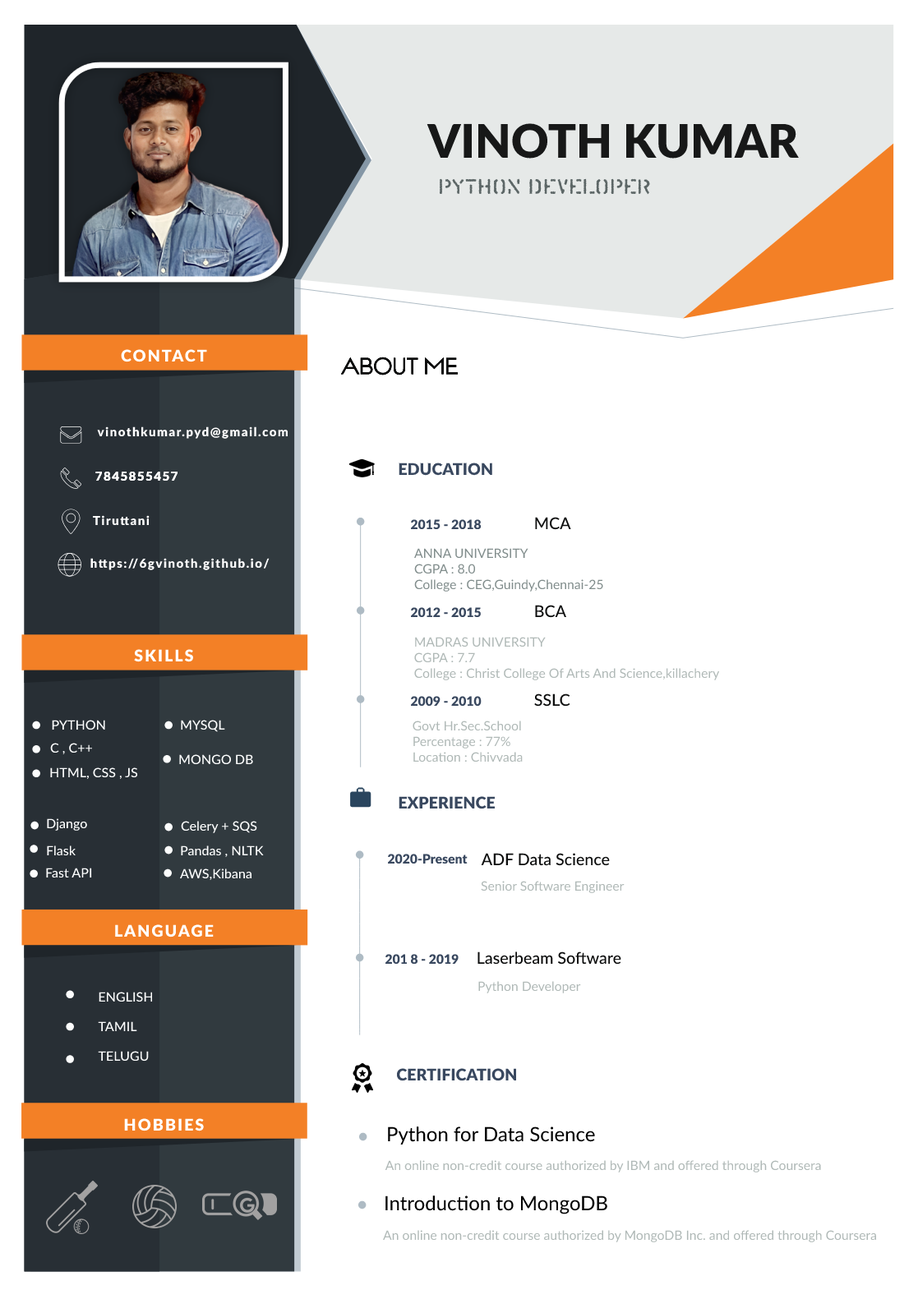
<style>
.page{position:relative;width:918px;height:1299px;background:#ffffff}
.page>*{position:absolute;margin:0}
.t1{font:46.4px "Lato-Black";color:#171818}
.t2{font:18.9px "TrendyUniversity";color:#5c6666}
.t3{font:16.2px "Lato-Black";letter-spacing:0.1em;color:#ffffff}
.t4{font:22.2px "TarponMotel";color:#0c0d0d}
.t5{font:12.3px "Lato-Black";letter-spacing:0.1em;color:#ffffff}
.t6{font:16.2px "Lato-Black";color:#39485f}
.t7{font:12.9px "Lato-Black";color:#39485f}
.t8{font:16.2px "Lato-Medium";color:#0c0d0d}
.t9{font:12.9px "Lato-Regular";color:#818d8c}
.t10{font:12.9px "Lato-Regular";color:#b0b9b7}
.t11{font:12.9px "Lato-Medium";color:#fdfefe}
.t12{font:12.9px/29.9px "Lato-Medium";color:#fdfefe}
.t13{font:19.7px "Lato-Regular";color:#000000}
</style>
<div class="page">
<p class="t1" style="left:426px;top:123px;width:373px;height:36px">VINOTH KUMAR</p>
<p class="t2" style="left:439px;top:178px;width:211px;height:17px">PYTHON DEVELOPER</p>
<p class="t3" style="left:121px;top:349px;width:86px;height:13px">CONTACT</p>
<p class="t4" style="left:340px;top:357px;width:119px;height:19px">ABOUT ME</p>
<p class="t5" style="left:97px;top:426px;width:191px;height:13px">vinothkumar.pyd@gmail.com</p>
<p class="t5" style="left:95px;top:472px;width:82px;height:9px">7845855457</p>
<p class="t5" style="left:95px;top:472px;width:82px;height:9px">7845855457</p>
<p class="t6" style="left:399px;top:463px;width:93px;height:13px">EDUCATION</p>
<p class="t5" style="left:93px;top:515px;width:57px;height:10px">Tiruttani</p>
<p class="t7" style="left:410px;top:519px;width:72px;height:11px">2015 - 2018</p>
<p class="t8" style="left:535px;top:517px;width:36px;height:13px">MCA</p>
<p class="t5" style="left:90px;top:558px;width:180px;height:12px">https://6gvinoth.github.io/</p>
<p class="t9" style="left:414px;top:548px;width:189px;height:44px;text-align:justify">ANNA UNIVERSITY<br>CGPA : 8.0<br>College : CEG,Guindy,Chennai-25</p>
<p class="t8" style="left:535px;top:605px;width:31px;height:13px">BCA</p>
<p class="t7" style="left:410px;top:607px;width:71px;height:11px">2012 - 2015</p>
<p class="t10" style="left:414px;top:637px;width:306px;height:43px;text-align:justify">MADRAS UNIVERSITY<br>CGPA : 7.7<br>College : Christ College Of Arts And Science,killachery</p>
<p class="t3" style="left:134px;top:649px;width:59px;height:13px">SKILLS</p>
<p class="t7" style="left:410px;top:696px;width:72px;height:11px">2009 - 2010</p>
<p class="t8" style="left:534px;top:694px;width:36px;height:13px">SSLC</p>
<p class="t11" style="left:52px;top:720px;width:53px;height:11px">PYTHON</p>
<p class="t11" style="left:181px;top:720px;width:44px;height:12px">MYSQL</p>
<p class="t10" style="left:413px;top:721px;width:110px;height:42px;text-align:justify">Govt Hr.Sec.School<br>Percentage : 77%<br>Location : Chivvada</p>
<p class="t11" style="left:50px;top:743px;width:43px;height:12px">C , C++</p>
<p class="t11" style="left:179px;top:754px;width:74px;height:11px">MONGO DB</p>
<p class="t11" style="left:50px;top:767px;width:88px;height:13px">HTML, CSS , JS</p>
<p class="t6" style="left:399px;top:796px;width:96px;height:13px">EXPERIENCE</p>
<p class="t11" style="left:47px;top:818px;width:40px;height:13px">Django</p>
<p class="t11" style="left:181px;top:821px;width:76px;height:12px">Celery + SQS</p>
<p class="t11" style="left:47px;top:846px;width:29px;height:10px">Flask</p>
<p class="t11" style="left:181px;top:846px;width:83px;height:12px">Pandas , NLTK</p>
<p class="t7" style="left:387px;top:854px;width:81px;height:10px">2020-Present</p>
<p class="t8" style="left:481px;top:853px;width:129px;height:13px">ADF Data Science</p>
<p class="t11" style="left:46px;top:868px;width:46px;height:10px">Fast API</p>
<p class="t11" style="left:180px;top:869px;width:71px;height:12px">AWS,Kibana</p>
<p class="t10" style="left:481px;top:881px;width:144px;height:12px">Senior Software Engineer</p>
<p class="t3" style="left:115px;top:924px;width:99px;height:14px">LANGUAGE</p>
<p class="t8" style="left:477px;top:952px;width:144px;height:13px">Laserbeam Software</p>
<p class="t7" style="left:385px;top:954px;width:74px;height:10px">201 8 - 2019</p>
<p class="t10" style="left:478px;top:981px;width:103px;height:12px">Python Developer</p>
<p class="t12" style="left:98px;top:992px;width:55px;height:70px">ENGLISH<br>TAMIL<br>TELUGU</p>
<p class="t6" style="left:396px;top:1068px;width:121px;height:13px">CERTIFICATION</p>
<p class="t3" style="left:124px;top:1118px;width:80px;height:14px">HOBBIES</p>
<p class="t13" style="left:388px;top:1127px;width:207px;height:18px">Python for Data Science</p>
<p class="t10" style="left:385px;top:1160px;width:436px;height:13px">An online non-credit course authorized by IBM and offered through Coursera</p>
<p class="t13" style="left:385px;top:1196px;width:222px;height:19px">Introduction to MongoDB</p>
<p class="t10" style="left:383px;top:1230px;width:493px;height:12px">An online non-credit course authorized by MongoDB Inc. and offered through Coursera</p>
</div>
